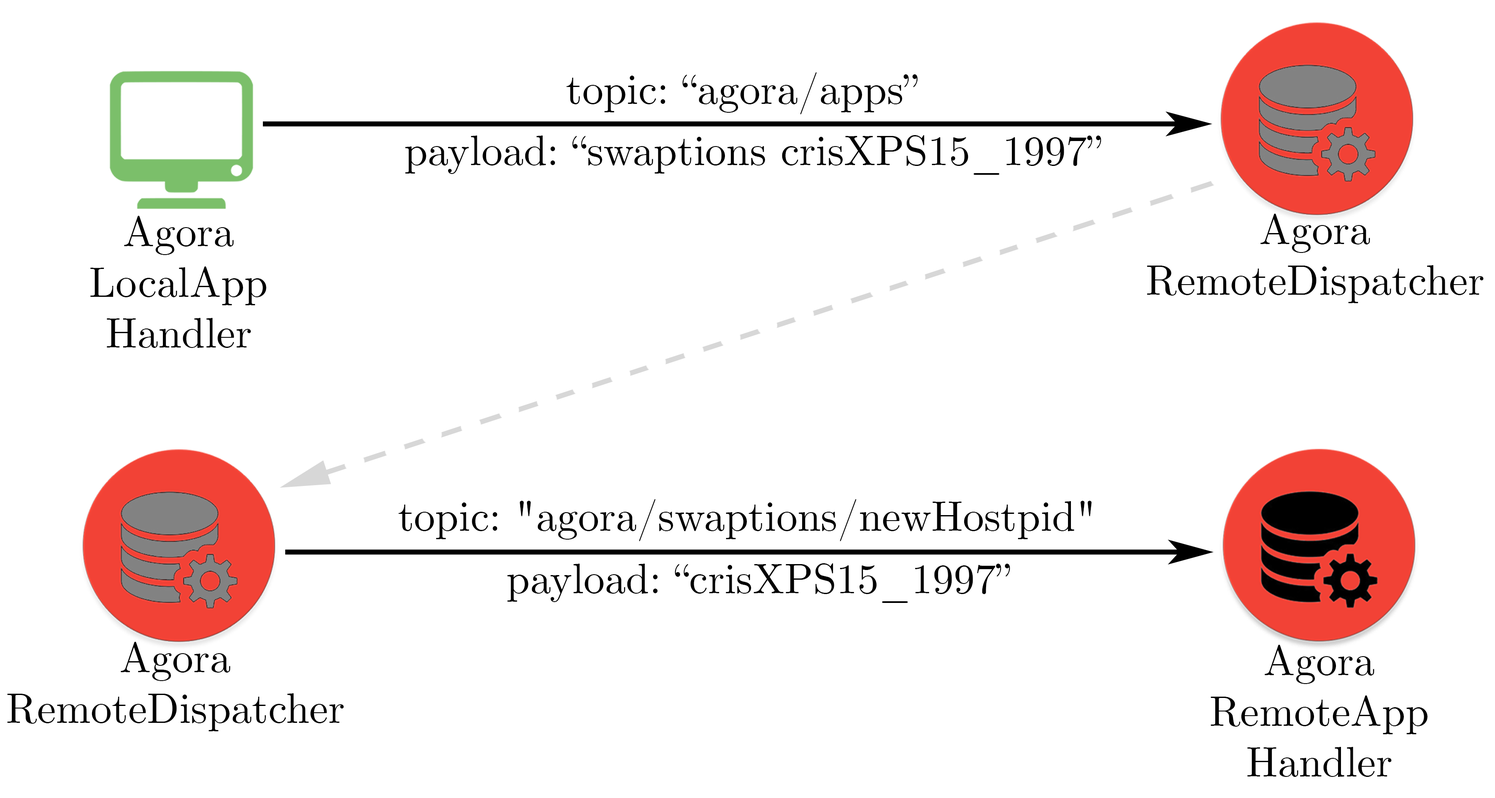
<style>
.page{position:relative;width:1495px;height:798px;background:#ffffff}
.page>*{position:absolute;margin:0}
.t1{font:42.2px "CMUSerif-Roman";color:#000000}
</style>
<div class="page">
<p class="t1" style="left:566px;top:72px;width:352px;height:42px">topic: “agora/apps”</p>
<p class="t1" style="left:405px;top:135px;width:696px;height:40px">payload: “swaptions crisXPS15_1997”</p>
<p class="t1" style="left:90px;top:216px;width:176px;height:132px;text-align:center">Agora<br>LocalApp<br>Handler</p>
<p class="t1" style="left:1147px;top:214px;width:337px;height:89px;text-align:center">Agora<br>RemoteDispatcher</p>
<p class="t1" style="left:398px;top:499px;width:694px;height:42px">topic: "agora/swaptions/newHostpid"</p>
<p class="t1" style="left:507px;top:563px;width:503px;height:40px">payload: “crisXPS15_1997”</p>
<p class="t1" style="left:7px;top:641px;width:337px;height:90px;text-align:center">Agora<br>RemoteDispatcher</p>
<p class="t1" style="left:1211px;top:644px;width:217px;height:132px;text-align:center">Agora<br>RemoteApp<br>Handler</p>
</div>
